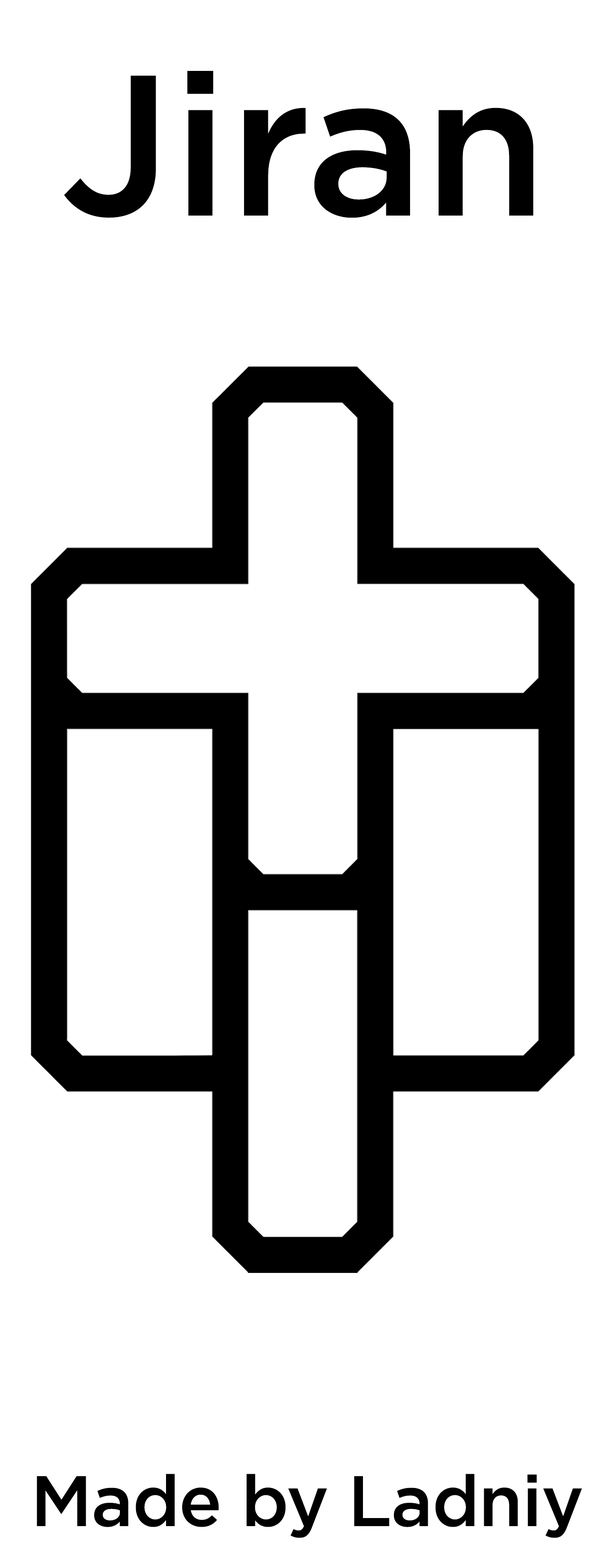
<style>
.page{position:relative;width:607px;height:1568px;background:#ffffff}
.page>*{position:absolute;margin:0}
.t1{font:199.9px "Gotham-Medium";color:#000000}
.t2{font:71.4px "Gotham-Medium";letter-spacing:-0.015em;color:#000000}
</style>
<div class="page">
<p class="t1" style="left:64px;top:71px;width:469px;height:147px">Jiran</p>
<p class="t2" style="left:37px;top:1474px;width:545px;height:64px">Made by Ladniy</p>
</div>
